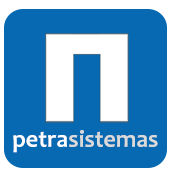
<style>
.page{position:relative;width:171px;height:180px;background:#0669b2}
.page>*{position:absolute;margin:0}
.t1{font:24.5px "Candara-Bold";letter-spacing:-0.005em;color:#dadada}
.t2{font:24.5px "Candara-Bold";letter-spacing:-0.005em;color:#ffffff}
</style>
<div class="page">
<p class="t1" style="left:13px;top:130px;width:145px;height:23px"><span class="t2">petra</span>sistemas</p>
</div>
